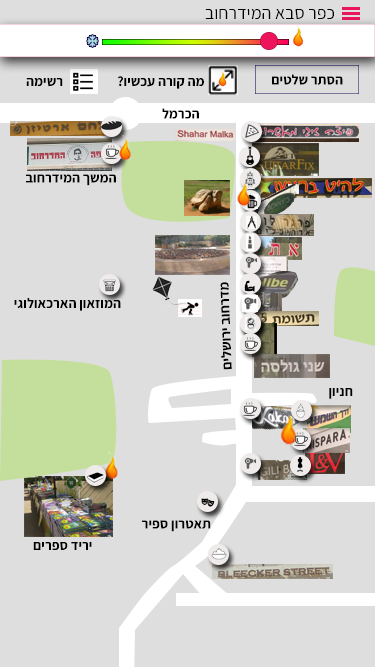
<style>
.page{position:relative;width:375px;height:667px;background:#dedede}
.page>*{position:absolute;margin:0}
.t1{font:18px "Assistant-Regular";color:#000000}
.t2{font:14px "Assistant-Bold";color:#000000}
</style>
<div class="page">
<p class="t1" style="left:205px;top:9px;width:129px;height:11px">כפר סבא המידרחוב</p>
<p class="t2" style="left:26px;top:78px;width:37px;height:9px">רשימה</p>
<p class="t2" style="left:117px;top:76px;width:87px;height:13px">מה קורה עכשיו?</p>
<p class="t2" style="left:272px;top:74px;width:71px;height:11px">הסתר שלטים</p>
<p class="t2" style="left:162px;top:108px;width:37px;height:11px">הכרמל</p>
<p class="t2" style="left:26px;top:174px;width:90px;height:12px">המשך המידרחוב</p>
<p class="t2" style="left:220px;top:282px;width:12px;height:88px;rotate:-92deg">מדרחוב ירושלים</p>
<p class="t2" style="left:14px;top:298px;width:107px;height:13px">המוזאון הארכאולוגי</p>
<p class="t2" style="left:329px;top:387px;width:24px;height:12px">חניון</p>
<p class="t2" style="left:142px;top:520px;width:69px;height:12px">תאטרון ספיר</p>
<p class="t2" style="left:33px;top:542px;width:59px;height:9px">יריד ספרים</p>
</div>
